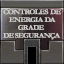
<style>
.page{position:relative;width:64px;height:64px}
.page>*{position:absolute;margin:0}
.t1{font:7.2px/7.9px "Garamond-Bold";letter-spacing:-0.1em;color:#ceccca;scale:1.11 1}
</style>
<div class="page">
<p class="t1" style="left:3px;top:9px;width:58px;height:31px;text-align:center">CONTROLES  DE<br>   ENERGIA  DA <br>GRADE<br> DE SEGURANÇA</p>
</div>
